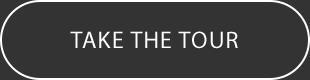
<style>
.page{position:relative;width:310px;height:80px;background:#333333}
.page>*{position:absolute;margin:0}
.t1{font:24px "MyriadPro-Regular";letter-spacing:0.05em;color:#ffffff;text-transform:uppercase}
</style>
<div class="page">
<p class="t1" style="left:70px;top:31px;width:168px;height:18px">TAKE THE TOUR</p>
</div>
